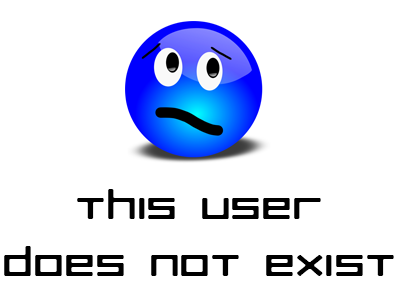
<style>
.page{position:relative;width:400px;height:300px;background:#ffffff}
.page>*{position:absolute;margin:0}
.t1{font:38.4px "RazerRegular";color:#000000;scale:1.25 1}
</style>
<div class="page">
<p class="t1" style="left:4px;top:189px;width:390px;height:87px;text-align:center">this user<br>does not exist</p>
</div>
